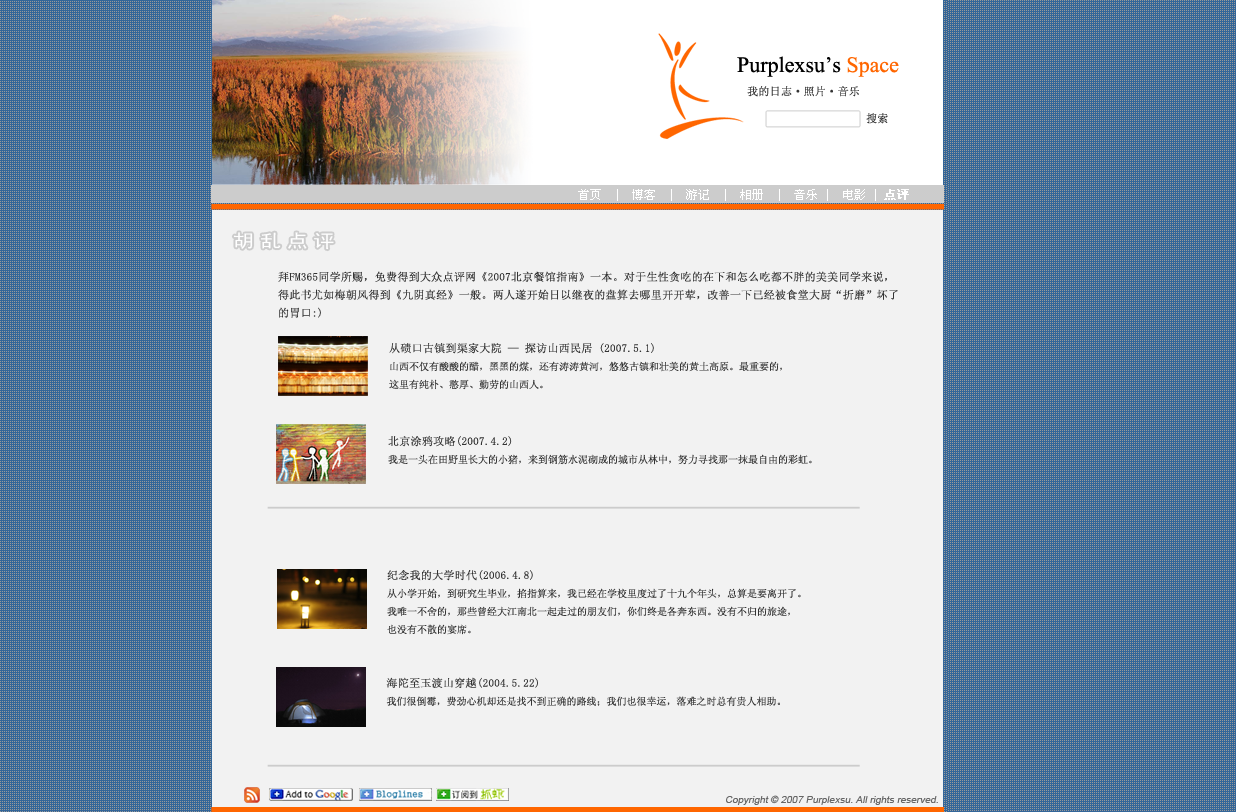
<style>
.page{position:relative;width:1236px;height:812px;background:#f2f2f2}
.page>*{position:absolute;margin:0}
.t1{font:22px "TimesNewRomanPSMT";color:#000000}
.t2{font:22px "TimesNewRomanPSMT";color:#ff6600}
.t3{font:11px "SimSun";color:#333333;font-weight:bold}
.t4{font:12px "SimSun";color:#ffffff}
.t5{font:12px "SimSun";color:#ffffff;font-weight:bold}
.t6{font:18px "SimHei";letter-spacing:0.24em;color:#ffffff;scale:1.2 1}
.t7{font:11px/18px "SimSun";color:#333333;font-weight:bold}
.t8{font:10px/18px "SimSun";color:#333333}
.t9{font:10px "ArialMT";color:#666666;font-style:italic}
</style>
<div class="page">
<p class="t1" style="left:737px;top:56px;width:162px;height:21px">Purplexsu’s <span class="t2">Space</span></p>
<p class="t3" style="left:747px;top:86px;width:112px;height:11px">我的日志·照片·音乐</p>
<p class="t3" style="left:866px;top:113px;width:22px;height:11px">搜索</p>
<p class="t4" style="left:578px;top:189px;width:331px;height:12px">首页  |  博客  |  游记  |  相册  |  音乐 |  电影 | <span class="t5">点评</span></p>
<p class="t6" style="left:233px;top:232px;width:101px;height:18px">胡乱点评</p>
<p class="t7" style="left:278px;top:271px;width:620px;height:47px">拜FM365同学所赐，免费得到大众点评网《2007北京餐馆指南》一本。对于生性贪吃的在下和怎么吃都不胖的美美同学来说，<br>得此书尤如梅朝风得到《九阴真经》一般。两人遂开始日以继夜的盘算去哪里开开荤，改善一下已经被食堂大厨“折磨”坏了<br>的胃口:)</p>
<p class="t8" style="left:389px;top:343px;width:393px;height:47px"><span class="t7">从碛口古镇到渠家大院 — 探访山西民居 (2007.5.1)<br></span>山西不仅有酸酸的醋，黑黑的煤，还有涛涛黄河，悠悠古镇和壮美的黄土高原。最重要的，<br>这里有纯朴、憨厚、勤劳的山西人。</p>
<p class="t8" style="left:388px;top:435px;width:424px;height:30px"><span class="t7">北京涂鸦攻略(2007.4.2)<br></span>我是一头在田野里长大的小猪，来到钢筋水泥砌成的城市从林中，努力寻找那一抹最自由的彩虹。</p>
<p class="t8" style="left:387px;top:570px;width:414px;height:65px"><span class="t7">纪念我的大学时代(2006.4.8)<br></span>从小学开始，到研究生毕业，掐指算来，我已经在学校里度过了十九个年头，总算是要离开了。<br>我唯一不舍的，那些曾经大江南北一起走过的朋友们，你们终是各奔东西。没有不归的旅途，<br>也没有不散的宴席。</p>
<p class="t8" style="left:386px;top:677px;width:394px;height:29px"><span class="t7">海陀至玉渡山穿越(2004.5.22)<br></span>我们很倒霉，费劲心机却还是找不到正确的路线；我们也很幸运，落难之时总有贵人相助。</p>
<p class="t9" style="left:726px;top:795px;width:212px;height:10px">Copyright © 2007 Purplexsu. All rights reserved.</p>
</div>
